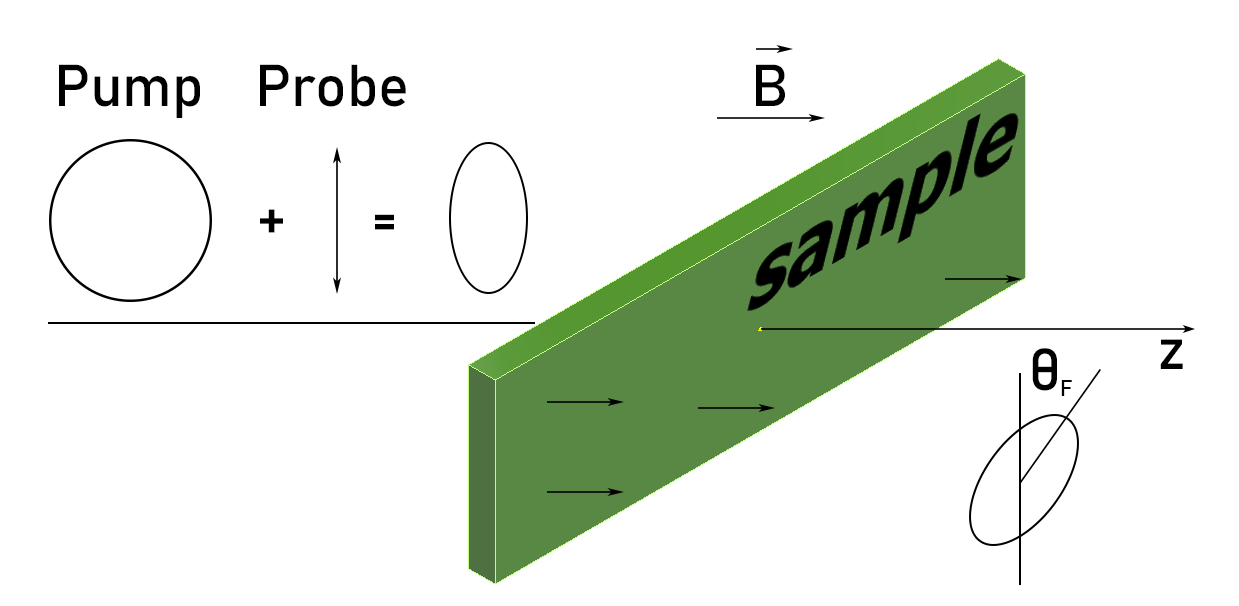
<style>
.page{position:relative;width:1239px;height:606px;background:#ffffff}
.page>*{position:absolute;margin:0}
.t1{font:58.3px "Bahnschrift";letter-spacing:-0.005em;color:#000000}
.t2{font:21.7px "Bahnschrift";letter-spacing:-0.005em;color:#000000}
</style>
<div class="page">
<p class="t1" style="left:59px;top:64px;width:141px;height:54px">Pump</p>
<p class="t1" style="left:260px;top:64px;width:146px;height:43px">Probe</p>
<p class="t1" style="left:756px;top:64px;width:29px;height:42px">B</p>
<p class="t1" style="left:260px;top:209px;width:23px;height:24px">+</p>
<p class="t1" style="left:375px;top:214px;width:19px;height:16px">=</p>
<p class="t1" style="left:1160px;top:339px;width:23px;height:30px">z</p>
<p class="t1" style="left:1032px;top:348px;width:25px;height:43px">θ</p>
<p class="t2" style="left:1061px;top:380px;width:11px;height:16px">F</p>
</div>
